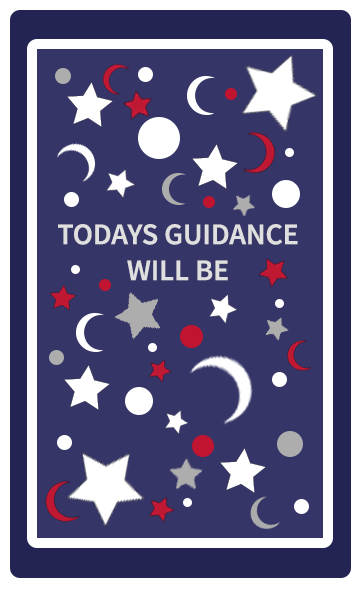
<style>
.page{position:relative;width:362px;height:589px;background:#353567}
.page>*{position:absolute;margin:0}
.t1{font:30px "SourceSansPro-Semibold";color:#dfdfdf}
</style>
<div class="page">
<p class="t1" style="left:58px;top:224px;width:240px;height:57px;text-align:center">TODAYS GUIDANCE WILL BE</p>
</div>
